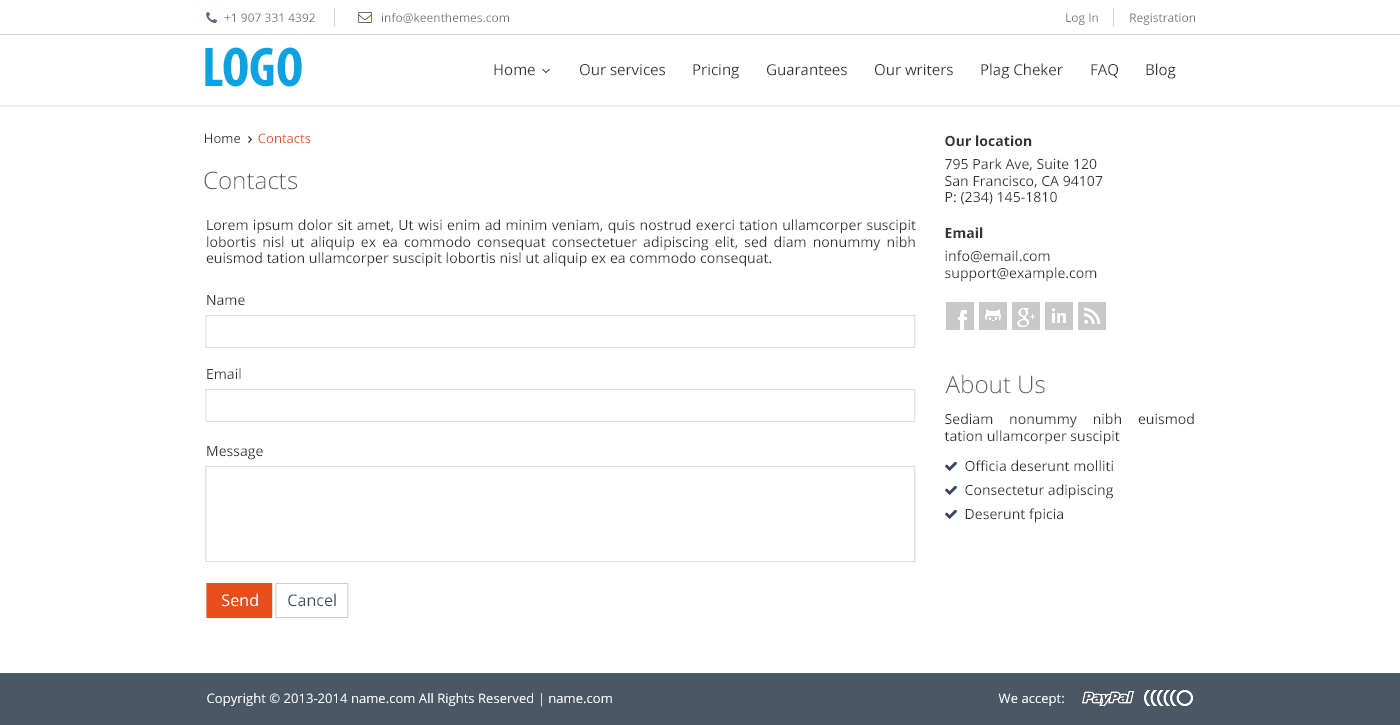
<style>
.page{position:relative;width:1400px;height:725px;background:#ffffff}
.page>*{position:absolute;margin:0}
.t1{font:12px "OpenSans";color:#737373}
.t2{font:56.6px "MyriadPro-BoldCond";color:#0da3e2}
.t3{font:15px "OpenSans";color:#333333}
.t4{font:13px "OpenSans";color:#e84d1c}
.t5{font:13px "OpenSans";color:#333333}
.t6{font:14px "OpenSans-Bold";color:#333333}
.t7{font:14px "OpenSans";color:#333333}
.t8{font:24px "OpenSans-Light";color:#5a5d66}
.t9{font:14px/24px "OpenSans";color:#333333}
.t10{font:16px "OpenSans";color:#ffffff}
.t11{font:16px "OpenSans";color:#3e4d5c}
</style>
<div class="page">
<p class="t1" style="left:224px;top:13px;width:91px;height:9px">+1 907 331 4392</p>
<p class="t1" style="left:382px;top:13px;width:127px;height:10px">info@keenthemes.com</p>
<p class="t1" style="left:1066px;top:13px;width:32px;height:12px">Log In</p>
<p class="t1" style="left:1130px;top:13px;width:65px;height:12px">Registration</p>
<p class="t2" style="left:205px;top:47px;width:97px;height:40px">LOGO</p>
<p class="t3" style="left:494px;top:64px;width:41px;height:12px">Home</p>
<p class="t3" style="left:580px;top:64px;width:85px;height:12px">Our services</p>
<p class="t3" style="left:693px;top:64px;width:46px;height:15px">Pricing</p>
<p class="t3" style="left:767px;top:64px;width:80px;height:12px">Guarantees</p>
<p class="t3" style="left:875px;top:64px;width:78px;height:12px">Our writers</p>
<p class="t3" style="left:981px;top:63px;width:82px;height:16px">Plag Cheker</p>
<p class="t3" style="left:1091px;top:64px;width:27px;height:14px">FAQ</p>
<p class="t3" style="left:1146px;top:63px;width:30px;height:16px">Blog</p>
<p class="t4" style="left:205px;top:133px;width:106px;height:10px"><span class="t5">Home     </span>Сontacts</p>
<p class="t6" style="left:945px;top:135px;width:87px;height:12px">Our location</p>
<p class="t7" style="left:945px;top:158px;width:158px;height:47px;text-align:justify">795 Park Ave, Suite 120<br>San Francisco, CA 94107<br>P: (234) 145-1810</p>
<p class="t8" style="left:204px;top:171px;width:94px;height:19px">Contacts</p>
<p class="t7" style="left:206px;top:219px;width:710px;height:48px;text-align:justify">Lorem ipsum dolor sit amet, Ut wisi enim ad minim veniam, quis nostrud exerci tation ullamcorper suscipit lobortis nisl ut aliquip ex ea commodo consequat consectetuer adipiscing elit, sed diam nonummy nibh euismod tation ullamcorper suscipit lobortis nisl ut aliquip ex ea commodo consequat.</p>
<p class="t6" style="left:945px;top:227px;width:38px;height:12px">Email</p>
<p class="t7" style="left:945px;top:250px;width:152px;height:32px;text-align:justify">info@email.com<br>support@example.com</p>
<p class="t7" style="left:207px;top:295px;width:38px;height:11px">Name</p>
<p class="t7" style="left:207px;top:368px;width:34px;height:12px">Email</p>
<p class="t8" style="left:945px;top:374px;width:100px;height:20px">About Us</p>
<p class="t7" style="left:944px;top:413px;width:250px;height:32px;text-align:justify">Sediam nonummy nibh euismod tation ullamcorper suscipit</p>
<p class="t7" style="left:207px;top:446px;width:56px;height:14px">Message</p>
<p class="t9" style="left:965px;top:460px;width:148px;height:63px;text-align:justify">Officia deserunt molliti<br>Consectetur adipiscing<br>Deserunt fpicia</p>
<p class="t10" style="left:222px;top:593px;width:36px;height:14px">Send</p>
<p class="t11" style="left:288px;top:593px;width:48px;height:14px">Cancel</p>
</div>
